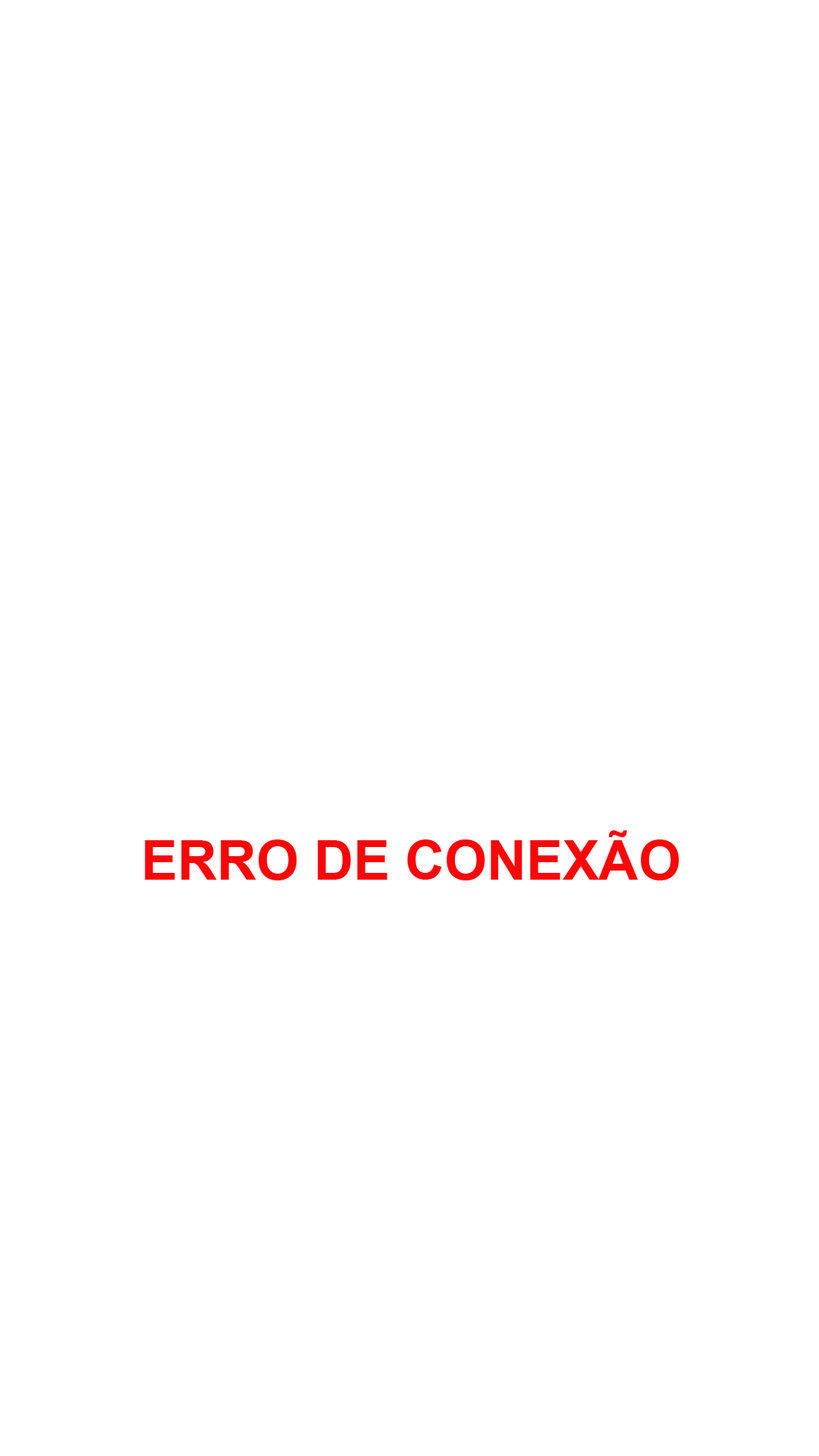
<style>
.page{position:relative;width:819px;height:1456px;background:#ffffff}
.page>*{position:absolute;margin:0}
.t1{font:54.6px "Arial-BoldMT";color:#f90707}
</style>
<div class="page">
<p class="t1" style="left:145px;top:830px;width:534px;height:50px">ERRO DE CONEXÃO</p>
</div>
